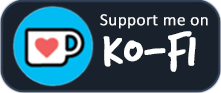
<style>
.page{position:relative;width:221px;height:93px;background:#19222c}
.page>*{position:absolute;margin:0}
.t1{font:16.7px/38px "Calibri-Light";color:#ffffff;font-weight:bold;scale:1.03 1}
.t2{font:47.3px/38px "TrashHand";color:#ffffff;font-weight:bold;scale:1.03 1}
</style>
<div class="page">
<p class="t1" style="left:100px;top:14px;width:108px;height:58px;text-align:center">Support me on<br><span class="t2">Ko-fi</span></p>
</div>
